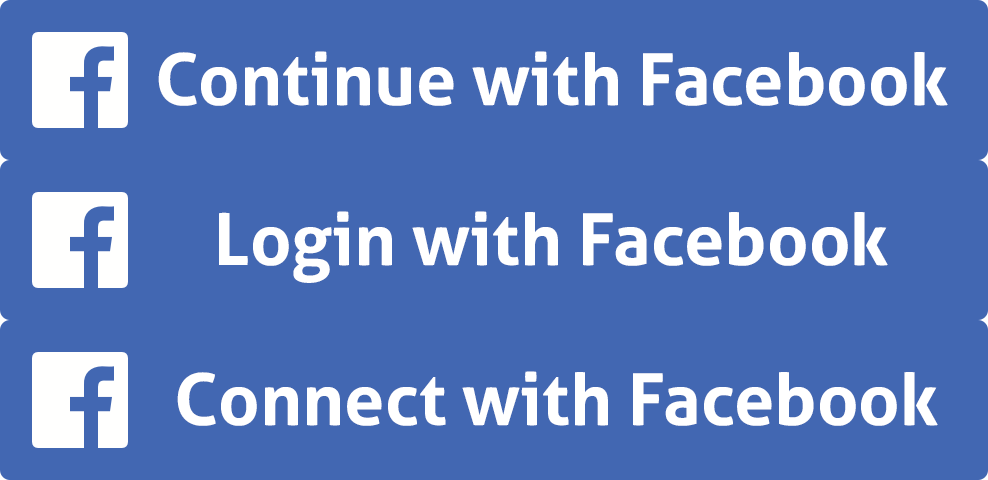
<style>
.page{position:relative;width:988px;height:480px;background:#4267b2}
.page>*{position:absolute;margin:0}
.t1{font:72px "Aller-Bold";color:#ffffff}
</style>
<div class="page">
<p class="t1" style="left:158px;top:51px;width:790px;height:55px">Continue with Facebook</p>
<p class="t1" style="left:219px;top:211px;width:669px;height:72px">Login with Facebook</p>
<p class="t1" style="left:177px;top:371px;width:761px;height:55px">Connect with Facebook</p>
</div>
